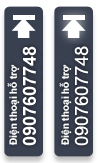
<style>
.page{position:relative;width:100px;height:163px}
.page>*{position:absolute;margin:0}
.t1{font:18px "Arial-BoldMT";color:#ffffff}
.t2{font:18px "ArialMT";color:#ffffff}
.t3{font:10px "Arial-BoldMT";color:#ffffff}
</style>
<div class="page">
<p class="t1" style="left:22px;top:46px;width:14px;height:100px;rotate:-90deg">0907607748</p>
<p class="t2" style="left:74px;top:46px;width:15px;height:100px;rotate:-90deg">0907607748</p>
<p class="t3" style="left:7px;top:64px;width:13px;height:82px;rotate:-90deg">Điện thoại hỗ trợ</p>
<p class="t3" style="left:59px;top:64px;width:13px;height:82px;rotate:-90deg">Điện thoại hỗ trợ</p>
</div>
